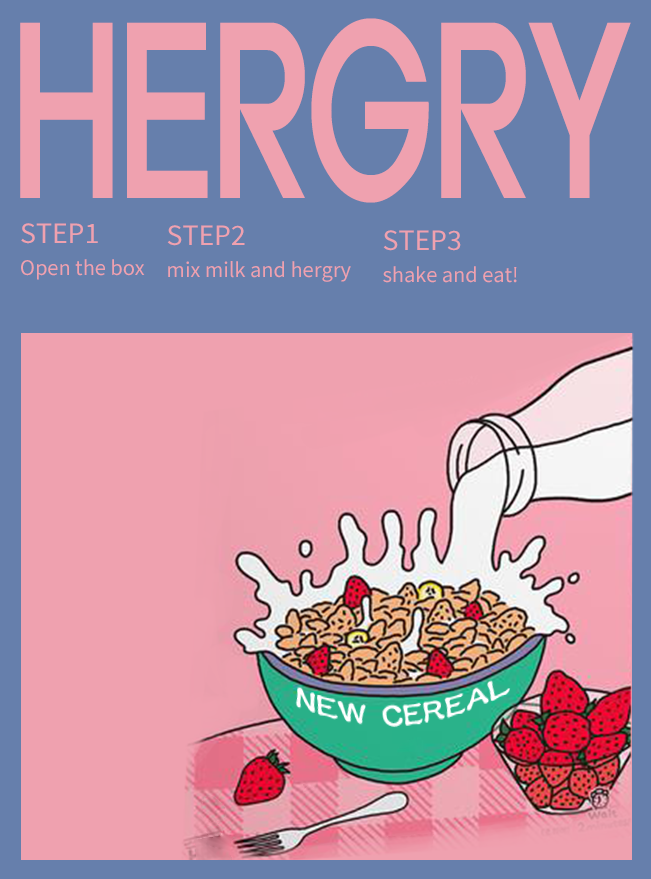
<style>
.page{position:relative;width:651px;height:879px;background:#667fac}
.page>*{position:absolute;margin:0}
.t1{font:224.2px "ExpoM-HM";color:#efa1af;scale:0.63 1}
.t2{font:20px/32px "NotoSansCJKkr-Regular";color:#efa1af}
.t3{font:26.7px/32px "NotoSansCJKkr-Regular";color:#efa1af}
</style>
<div class="page">
<p class="t1" style="left:20px;top:18px;width:611px;height:185px">HERGRY</p>
<p class="t2" style="left:21px;top:223px;width:124px;height:57px"><span class="t3">STEP1<br></span>Open the box</p>
<p class="t2" style="left:167px;top:225px;width:184px;height:57px"><span class="t3">STEP2<br></span>mix milk and hergry</p>
<p class="t2" style="left:383px;top:230px;width:134px;height:53px"><span class="t3">STEP3<br></span>shake and eat!</p>
</div>
